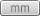
<style>
.page{position:relative;width:40px;height:16px}
.page>*{position:absolute;margin:0}
.t1{font:12px "ArialMT";color:#6e6e6e;scale:0.97 1}
</style>
<div class="page">
<p class="t1" style="left:11px;top:5px;width:18px;height:7px">mm</p>
</div>
